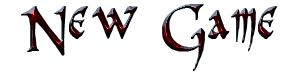
<style>
.page{position:relative;width:300px;height:75px;background:#ffffff}
.page>*{position:absolute;margin:0}
.t1{font:68.1px "PR-CelticNarrow"}
</style>
<div class="page">
<p class="t1" style="left:21px;top:4px;width:257px;height:67px">New Game</p>
</div>
